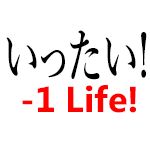
<style>
.page{position:relative;width:150px;height:150px;background:#ffffff}
.page>*{position:absolute;margin:0}
.t1{font:60px "YuMincho-Demibold";color:#000000;scale:0.62 1}
.t2{font:36px "MicrosoftPhagsPa-Bold";color:#ff0000}
</style>
<div class="page">
<p class="t1" style="left:6px;top:30px;width:141px;height:50px">いったい!</p>
<p class="t2" style="left:22px;top:85px;width:114px;height:28px">-1 Life!</p>
</div>
